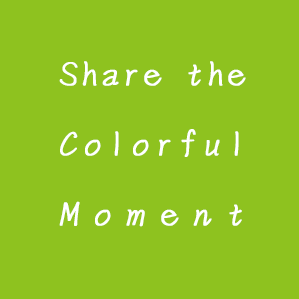
<style>
.page{position:relative;width:299px;height:299px;background:#8ec21f}
.page>*{position:absolute;margin:0}
.t1{font:40px "DFYa-W3-WIN-BF";color:#ffffff;font-weight:bold}
.t2{font:40px "DFYa-W3-WIN-BF";letter-spacing:0.07em;color:#ffffff;font-weight:bold}
.t3{font:40px "DFYa-W3-WIN-BF";letter-spacing:0.3em;color:#ffffff;font-weight:bold}
</style>
<div class="page">
<p class="t1" style="left:59px;top:61px;width:187px;height:166px;text-align:center">Share the<br><span class="t2">Colorful<br></span><span class="t3">Moment</span></p>
</div>
